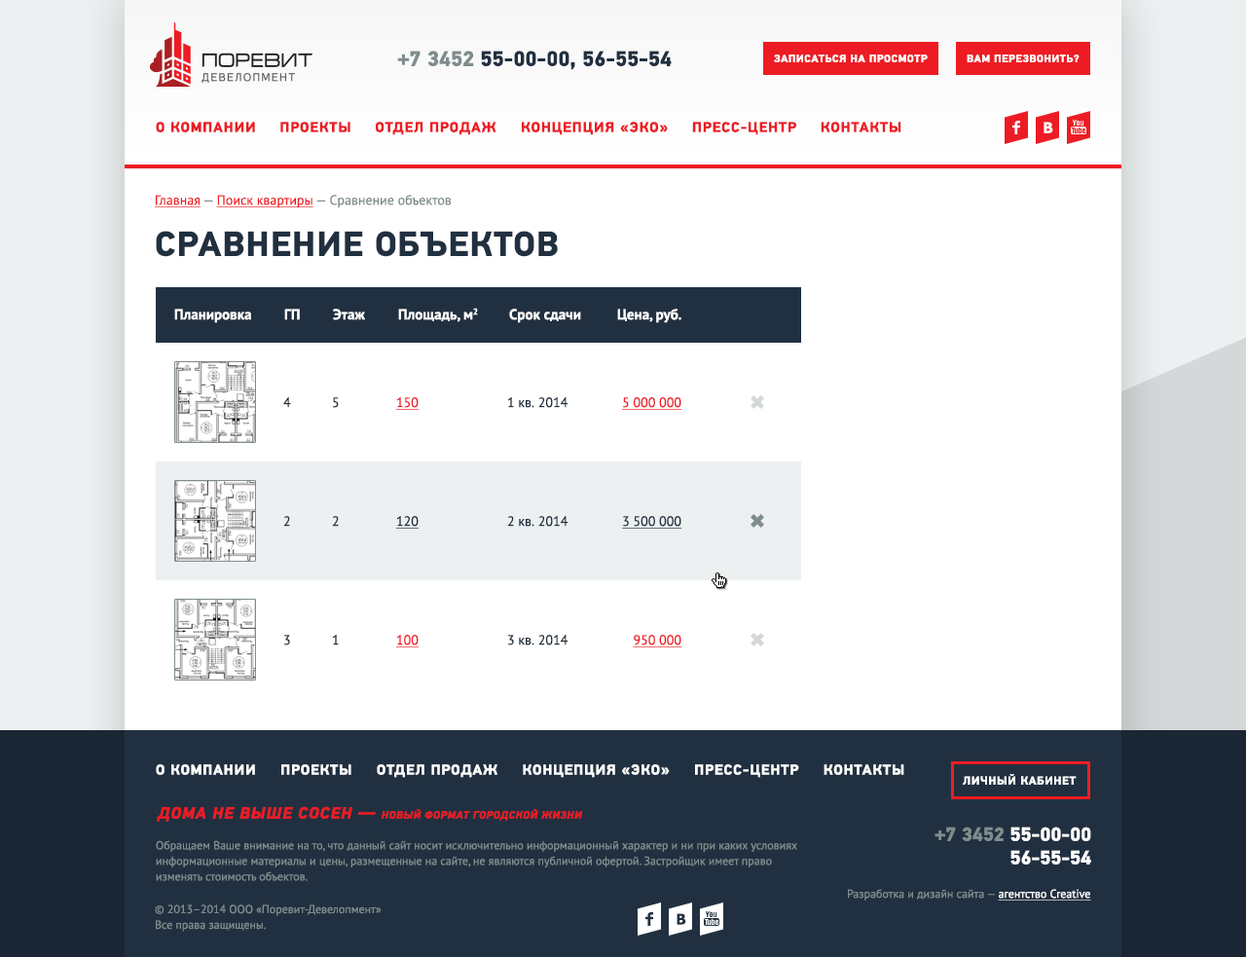
<style>
.page{position:relative;width:1246px;height:957px;background:#ffffff}
.page>*{position:absolute;margin:0}
.t1{font:21.4px "PFDinTextPro-Bold";color:#213040;text-transform:uppercase}
.t2{font:21.4px "PFDinTextPro-Bold";color:#7f8c8d;text-transform:uppercase}
.t3{font:10.7px "PFDinTextPro-Bold";letter-spacing:0.05em;color:#ffffff;text-transform:uppercase}
.t4{font:14.6px "PFDinTextPro-Bold";letter-spacing:0.05em;color:#ed1c24;text-transform:uppercase}
.t5{font:14.6px "PFDinTextPro-Bold";color:#ed1c24;text-transform:uppercase}
.t6{font:14.6px "Tahoma-Bold";letter-spacing:0.05em;color:#ffffff;text-transform:uppercase}
.t7{font:13.6px "PTSans-Regular";color:#7f8c8d}
.t8{font:13.6px "PTSans-Regular";color:#ed1c24;text-decoration:underline}
.t9{font:35px "PFDinTextPro-Bold";letter-spacing:0.03em;color:#213040;text-transform:uppercase}
.t10{font:14.6px "PTSans-Bold";color:#ffffff}
.t11{font:13.6px "PTSans-Regular";color:#213040}
.t12{font:13.6px "PTSans-Regular";color:#213040;text-decoration:underline}
.t13{font:14.6px "PFDinTextPro-Bold";letter-spacing:0.05em;color:#ffffff;text-transform:uppercase}
.t14{font:11.7px "PFDinTextPro-Bold";letter-spacing:0.05em;color:#ffffff;text-transform:uppercase}
.t15{font:10.7px "PFDinTextPro-BoldItalic";letter-spacing:0.05em;color:#ed1c24;text-transform:uppercase}
.t16{font:16.5px "PFDinTextPro-BoldItalic";letter-spacing:0.05em;color:#ed1c24;text-transform:uppercase}
.t17{font:19.5px/23.4px "PFDinTextPro-Bold";color:#ffffff;text-transform:uppercase}
.t18{font:19.5px/23.4px "PFDinTextPro-Bold";color:#7f8c8d;text-transform:uppercase}
.t19{font:11.7px/15.6px "PTSans-Regular";color:#7f8c8d}
.t20{font:11.7px "PTSans-Regular";color:#7f8c8d}
.t21{font:11.7px "PTSans-Regular";color:#ffffff;text-decoration:underline}
.t22{font:14.6px "Tahoma-Bold";letter-spacing:0.05em;color:#213040;text-transform:uppercase}
</style>
<div class="page">
<p class="t1" style="left:397px;top:51px;width:275px;height:19px"><span class="t2">+7 3452 </span>55-00-00, 56-55-54</p>
<p class="t3" style="left:774px;top:55px;width:154px;height:7px">записаться на просмотр</p>
<p class="t3" style="left:967px;top:55px;width:113px;height:7px">вам перезвонить?</p>
<p class="t4" style="left:156px;top:122px;width:745px;height:13px">О компани<span class="t5">и</span>     проект<span class="t5">ы</span>     отдел продаж     концепция «эко<span class="t5">»</span>     пресс-цент<span class="t5">р</span>     контакт<span class="t5">ы</span></p>
<p class="t6" style="left:1044px;top:122px;width:9px;height:11px">В</p>
<p class="t7" style="left:155px;top:195px;width:297px;height:13px"><span class="t8">Главная </span>— <span class="t8">Поиск квартиры </span>— Сравнение объектов</p>
<p class="t9" style="left:156px;top:231px;width:402px;height:26px">сравнение объектов</p>
<p class="t10" style="left:174px;top:309px;width:77px;height:14px">Планировка</p>
<p class="t10" style="left:284px;top:309px;width:16px;height:11px">ГП</p>
<p class="t10" style="left:333px;top:309px;width:32px;height:11px">Этаж</p>
<p class="t10" style="left:398px;top:308px;width:80px;height:14px">Площадь, м2</p>
<p class="t10" style="left:509px;top:309px;width:72px;height:14px">Срок сдачи</p>
<p class="t10" style="left:617px;top:309px;width:64px;height:14px">Цена, руб.</p>
<p class="t11" style="left:283px;top:397px;width:8px;height:11px">4</p>
<p class="t11" style="left:333px;top:397px;width:6px;height:11px">5</p>
<p class="t8" style="left:396px;top:397px;width:23px;height:13px">150</p>
<p class="t11" style="left:507px;top:397px;width:62px;height:11px">1 кв. 2014</p>
<p class="t8" style="left:622px;top:397px;width:60px;height:13px">5 000 000</p>
<p class="t11" style="left:283px;top:516px;width:7px;height:11px">2</p>
<p class="t11" style="left:332px;top:516px;width:7px;height:11px">2</p>
<p class="t12" style="left:396px;top:516px;width:23px;height:13px">120</p>
<p class="t11" style="left:507px;top:516px;width:62px;height:11px">2 кв. 2014</p>
<p class="t12" style="left:622px;top:516px;width:60px;height:13px">3 500 000</p>
<p class="t11" style="left:284px;top:635px;width:6px;height:10px">3</p>
<p class="t11" style="left:332px;top:635px;width:7px;height:10px">1</p>
<p class="t8" style="left:396px;top:635px;width:23px;height:12px">100</p>
<p class="t11" style="left:508px;top:635px;width:61px;height:10px">3 кв. 2014</p>
<p class="t8" style="left:633px;top:635px;width:49px;height:12px">950 000</p>
<p class="t13" style="left:156px;top:764px;width:748px;height:14px">О компании     проекты     отдел продаж     концепция «эко»     пресс-центр     контакты</p>
<p class="t14" style="left:963px;top:774px;width:114px;height:12px">личный кабинет</p>
<p class="t15" style="left:157px;top:806px;width:426px;height:16px"><span class="t16">дома не выше сосен — </span>новый формат городской жизни</p>
<p class="t17" style="left:935px;top:827px;width:156px;height:37px;text-align:right"><span class="t18">+7 3452 </span>55-00-00<br>56-55-54</p>
<p class="t19" style="left:156px;top:840px;width:641px;height:41px">Обращаем Ваше внимание на то, что данный сайт носит исключительно информационный характер и ни при каких условиях информационные материалы и цены, размещенные на сайте, не являются публичной офертой. Застройщик имеет право изменять стоимость объектов.</p>
<p class="t20" style="left:848px;top:889px;width:243px;height:11px">Разработка и дизайн сайта — <span class="t21">агентство Creative</span></p>
<p class="t19" style="left:155px;top:904px;width:227px;height:28px">© 2013–2014 ООО «Поревит-Девелопмент» <br>Все права защищены.</p>
<p class="t22" style="left:677px;top:913px;width:9px;height:12px">В</p>
</div>
